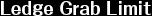
<style>
.page{position:relative;width:152px;height:16px;background:#000000}
.page>*{position:absolute;margin:0}
.t1{font:17.3px "FolkPro-Bold";color:#ffffff}
</style>
<div class="page">
<p class="t1" style="left:1px;top:1px;width:150px;height:16px">Ledge Grab Limit</p>
<p class="t1" style="left:33px;top:4px;width:10px;height:12px">g</p>
</div>
